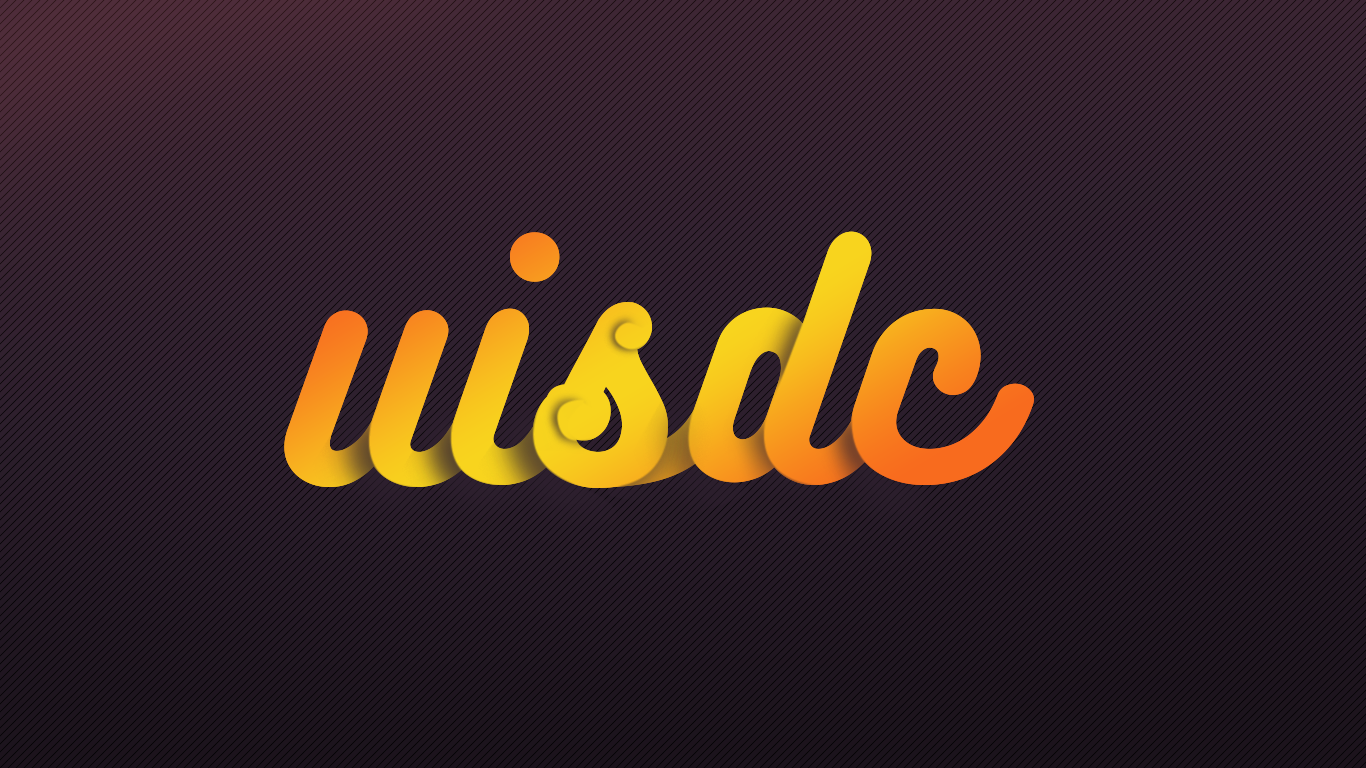
<style>
.page{position:relative;width:1366px;height:768px}
.page>*{position:absolute;margin:0}
.t1{font:300px "Bukhari-Script";letter-spacing:0.005em}
</style>
<div class="page">
<p class="t1" style="left:284px;top:231px;width:750px;height:257px">uisdc</p>
</div>
